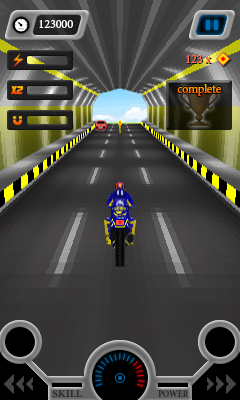
<style>
.page{position:relative;width:240px;height:400px}
.page>*{position:absolute;margin:0}
.t1{font:12px "MinionPro-Regular";color:#ffffff}
.t2{font:12px "MinionPro-Regular";color:#ff6e41}
.t3{font:12px "MinionPro-Regular"}
.t4{font:11.1px "DreamMMA";scale:0.54 1}
.t5{font:9.3px "MinionPro-Bold";color:#2f2f2f;scale:1.21 1}
.t6{font:9.3px "MinionPro-Bold";color:#2f2f2f;scale:0.9 1}
</style>
<div class="page">
<p class="t1" style="left:39px;top:20px;width:34px;height:8px">123000</p>
<p class="t2" style="left:186px;top:55px;width:25px;height:8px">123 x</p>
<p class="t3" style="left:187px;top:56px;width:25px;height:8px">123 x</p>
<p class="t4" style="left:11px;top:86px;width:13px;height:9px">x2</p>
<p class="t3" style="left:177px;top:84px;width:44px;height:12px">complete</p>
<p class="t5" style="left:52px;top:390px;width:30px;height:7px">SKILL</p>
<p class="t6" style="left:158px;top:390px;width:31px;height:7px">POWER</p>
</div>
